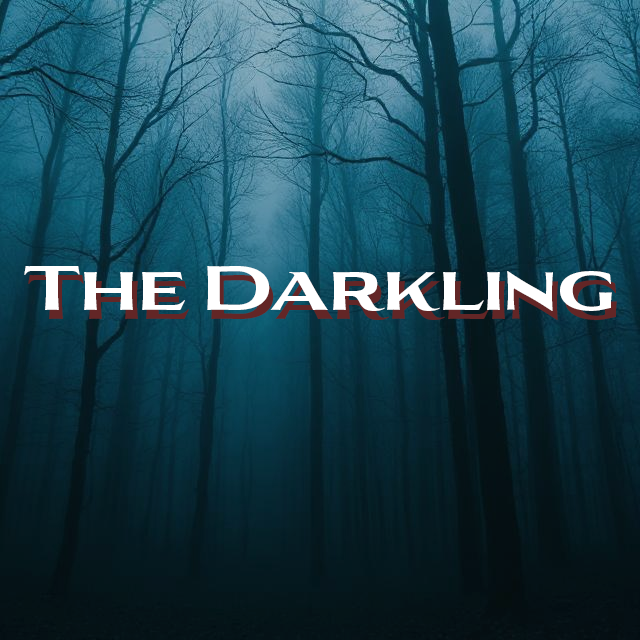
<style>
.page{position:relative;width:640px;height:640px}
.page>*{position:absolute;margin:0}
.t1{font:60.5px "AvianoFlareBold";color:#ffffff}
.t2{font:60.5px "AvianoFlareBold"}
</style>
<div class="page">
<p class="t1" style="left:24px;top:266px;width:588px;height:45px">The Darkling</p>
<p class="t2" style="left:28px;top:275px;width:589px;height:45px">The Darkling</p>
</div>
